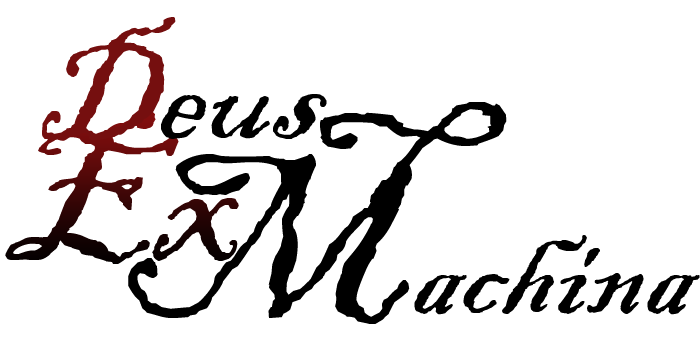
<style>
.page{position:relative;width:700px;height:350px;background:#ffffff}
.page>*{position:absolute;margin:0}
.t1{font:150px "BlackadderITC-Regular";color:#000000;font-style:italic}
.t2{font:150px "BlackadderITC-Regular";color:#750f0f;font-style:italic}
.t3{font:135px "BlackadderITC-Regular";color:#000000;font-style:italic}
.t4{font:250px "BlackadderITC-Regular";color:#000000;font-style:italic}
.t5{font:200px "BlackadderITC-Regular";color:#7b1515;font-style:italic}
.t6{font:200px "BlackadderITC-Regular";color:#010101;font-style:italic}
</style>
<div class="page">
<p class="t1" style="left:42px;top:17px;width:285px;height:124px"><span class="t2">D</span>eus</p>
<p class="t3" style="left:128px;top:102px;width:572px;height:222px"><span class="t4">M</span>achina</p>
<p class="t5" style="left:5px;top:112px;width:234px;height:152px">E<span class="t6">x</span></p>
</div>
